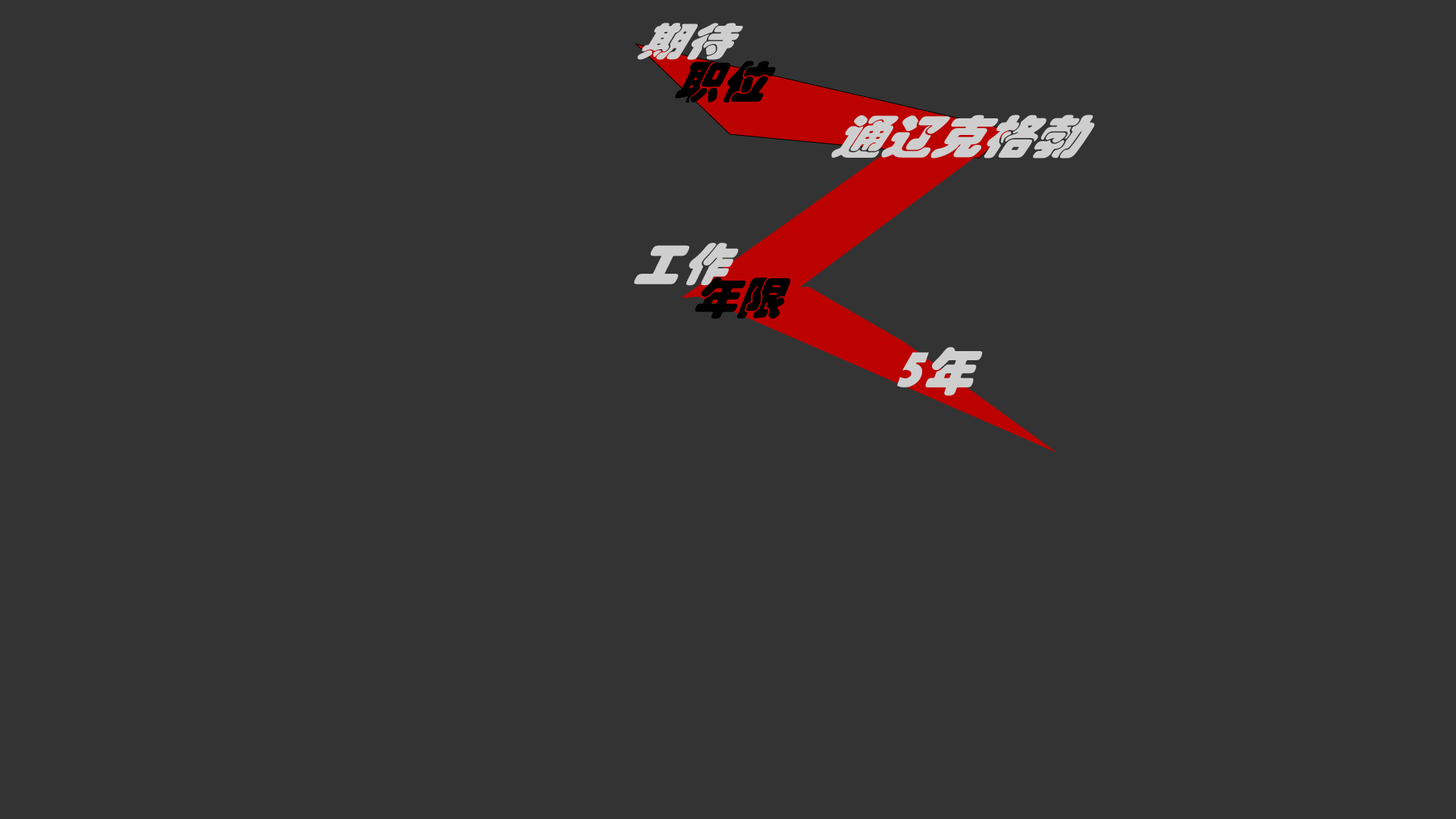
<style>
.page{position:relative;width:1456px;height:819px;background:#333333}
.page>*{position:absolute;margin:0}
.t1{font:45.5px "STHupo";color:#cecece}
.t2{font:49.4px "STHupo";color:#000000;scale:0.92 1}
.t3{font:54.6px "STHupo";color:#cecece;scale:0.91 1}
.t4{font:50.3px "STHupo";color:#cecece;scale:0.9 1}
.t5{font:47.5px "STHupo";color:#000000;scale:0.95 1}
.t6{font:54.6px "STHupo";color:#cecece;scale:0.94 1}
</style>
<div class="page">
<p class="t1" style="left:637px;top:23px;width:106px;height:37px">期待</p>
<p class="t2" style="left:675px;top:61px;width:101px;height:42px">职位</p>
<p class="t3" style="left:831px;top:115px;width:264px;height:43px">通辽克格勃</p>
<p class="t4" style="left:634px;top:243px;width:105px;height:43px">工作</p>
<p class="t5" style="left:695px;top:277px;width:96px;height:42px">年限</p>
<p class="t6" style="left:897px;top:347px;width:86px;height:49px">5年</p>
</div>
